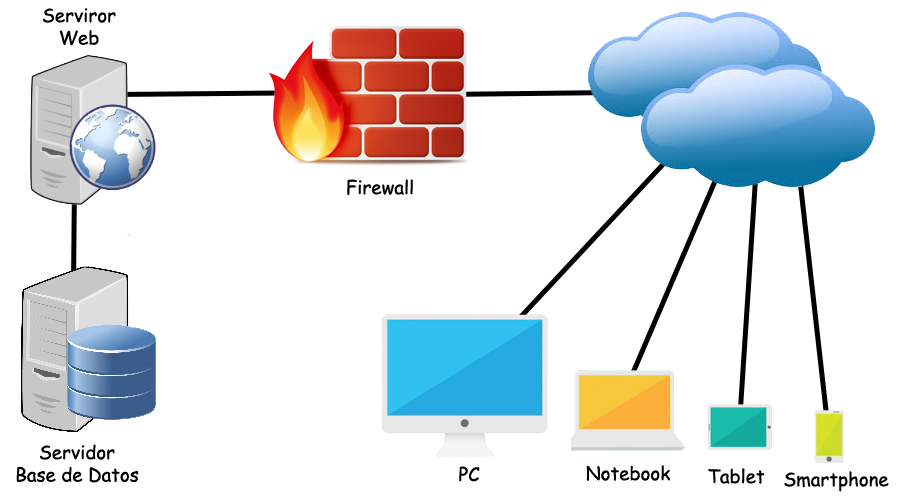
<style>
.page{position:relative;width:900px;height:500px;background:#ffffff}
.page>*{position:absolute;margin:0}
.t1{font:18.7px "ComicSansMS";color:#000000}
</style>
<div class="page">
<p class="t1" style="left:43px;top:8px;width:73px;height:38px;text-align:center">Serviror<br>Web</p>
<p class="t1" style="left:347px;top:179px;width:66px;height:16px">Firewall</p>
<p class="t1" style="left:16px;top:444px;width:123px;height:39px;text-align:center">Servidor<br>Base de Datos</p>
<p class="t1" style="left:459px;top:466px;width:21px;height:16px">PC</p>
<p class="t1" style="left:586px;top:465px;width:84px;height:16px">Notebook</p>
<p class="t1" style="left:708px;top:468px;width:57px;height:16px">Tablet</p>
<p class="t1" style="left:784px;top:471px;width:105px;height:21px">Smartphone</p>
</div>
